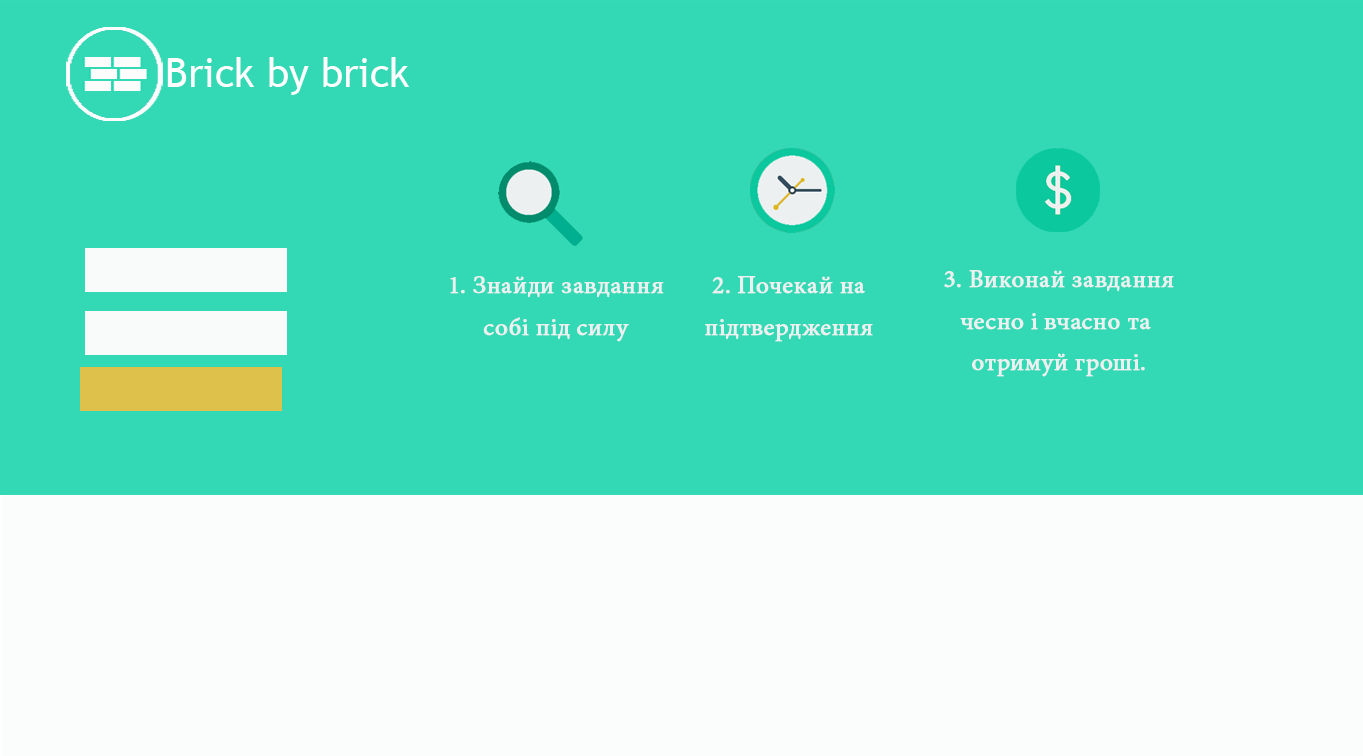
<style>
.page{position:relative;width:1363px;height:756px;background:#32d9b4}
.page>*{position:absolute;margin:0}
.t1{font:40px "TrebuchetMS";color:#ffffff}
.t2{font:25px/41.7px "MinionPro-Regular";color:#ecf0f0;font-weight:bold}
</style>
<div class="page">
<p class="t1" style="left:167px;top:57px;width:242px;height:38px">Brick by brick</p>
<p class="t2" style="left:944px;top:270px;width:230px;height:107px;text-align:center">3. Виконай завдання<br>чесно і вчасно та <br>отримуй гроші.</p>
<p class="t2" style="left:450px;top:276px;width:214px;height:66px;text-align:center">1. Знайди завдання<br>собі під силу</p>
<p class="t2" style="left:705px;top:276px;width:168px;height:66px;text-align:center">2. Почекай на<br>підтвердження</p>
</div>
